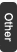
<style>
.page{position:relative;width:17px;height:52px;background:#333333}
.page>*{position:absolute;margin:0}
.t1{font:11px "ArialMT";letter-spacing:0.025em;color:#ffffff}
</style>
<div class="page">
<p class="t1" style="left:4px;top:13px;width:9px;height:29px;rotate:90deg">Other</p>
</div>
